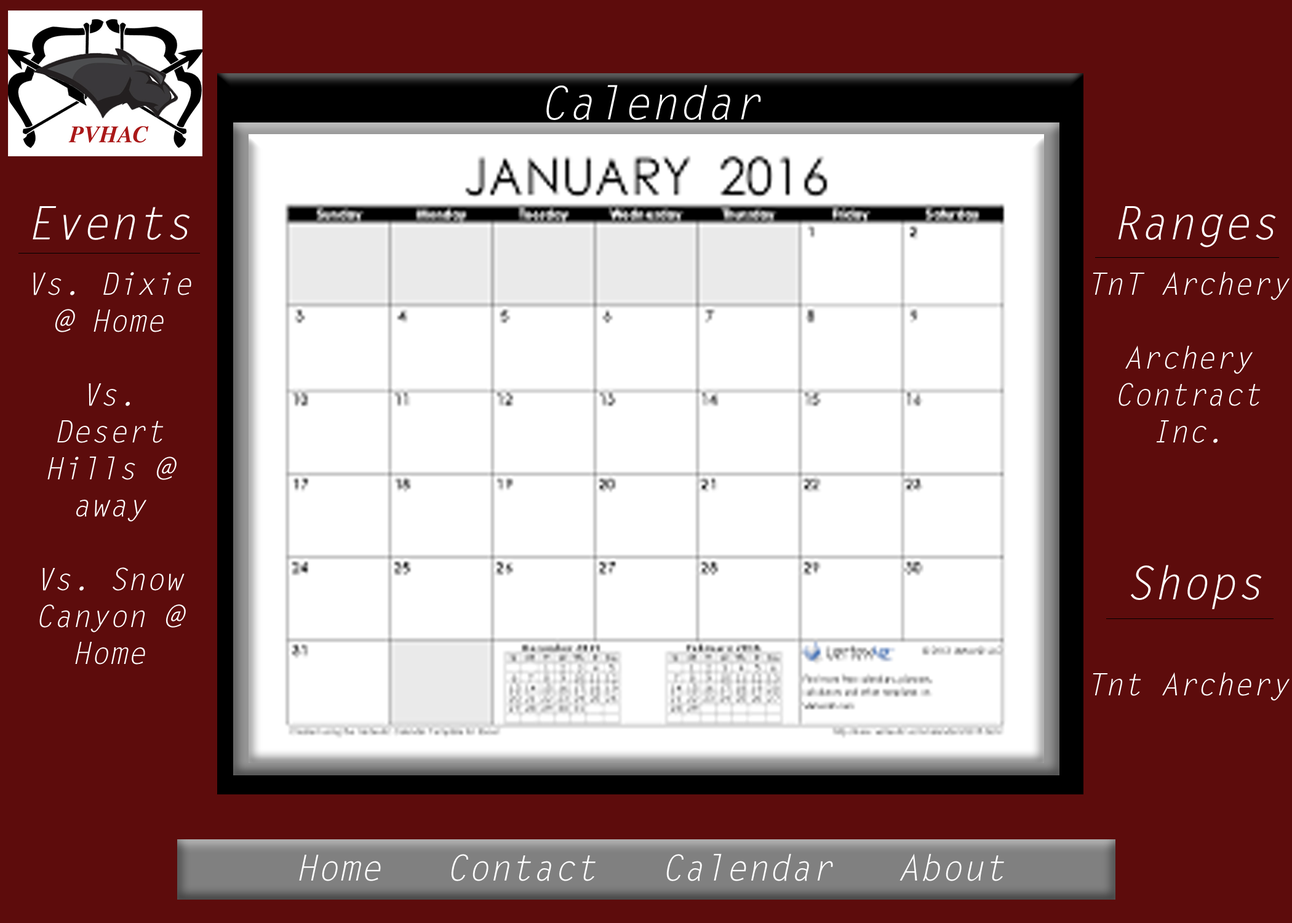
<style>
.page{position:relative;width:1292px;height:923px;background:#5d0c0c}
.page>*{position:absolute;margin:0}
.t1{font:46.1px "LetterGothicStd-Slanted";color:#ffffff}
.t2{font:30.8px "LetterGothicStd-Slanted";color:#ffffff}
.t3{font:7.4px "LetterGothicStd-Slanted";color:#ffffff}
.t4{font:35.9px "LetterGothicStd-Slanted";color:#ffffff}
</style>
<div class="page">
<p class="t1" style="left:546px;top:85px;width:215px;height:35px">Calendar</p>
<p class="t1" style="left:33px;top:206px;width:157px;height:34px">Events</p>
<p class="t1" style="left:1118px;top:206px;width:158px;height:41px">Ranges</p>
<p class="t2" style="left:33px;top:272px;width:158px;height:392px;text-align:center">Vs. Dixie @ Home<br><br>Vs. Desert Hills @ away<br><br>Vs. Snow Canyon @ Home</p>
<p class="t3" style="left:1093px;top:271px;width:197px;height:172px;text-align:center">TnT Archery<br><br>Archery Contract Inc.</p>
<p class="t1" style="left:1131px;top:565px;width:131px;height:44px">Shops</p>
<p class="t3" style="left:1093px;top:672px;width:197px;height:29px;text-align:center">Tnt Archery</p>
<p class="t4" style="left:299px;top:853px;width:705px;height:28px">Home   Contact   Calendar   About</p>
</div>
